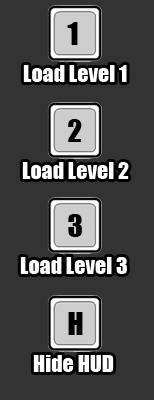
<style>
.page{position:relative;width:154px;height:400px;background:#333333}
.page>*{position:absolute;margin:0}
.t1{font:29.3px "Impact";color:#000000}
.t2{font:21.9px "Impact";color:#ffffff}
</style>
<div class="page">
<p class="t1" style="left:67px;top:22px;width:11px;height:23px">1</p>
<p class="t2" style="left:23px;top:65px;width:104px;height:17px">Load Level 1</p>
<p class="t1" style="left:68px;top:119px;width:14px;height:23px">2</p>
<p class="t2" style="left:22px;top:162px;width:107px;height:17px">Load Level 2</p>
<p class="t1" style="left:68px;top:214px;width:14px;height:23px">3</p>
<p class="t2" style="left:20px;top:257px;width:107px;height:17px">Load Level 3</p>
<p class="t1" style="left:68px;top:312px;width:15px;height:23px">H</p>
<p class="t2" style="left:33px;top:355px;width:81px;height:17px">Hide HUD</p>
</div>
